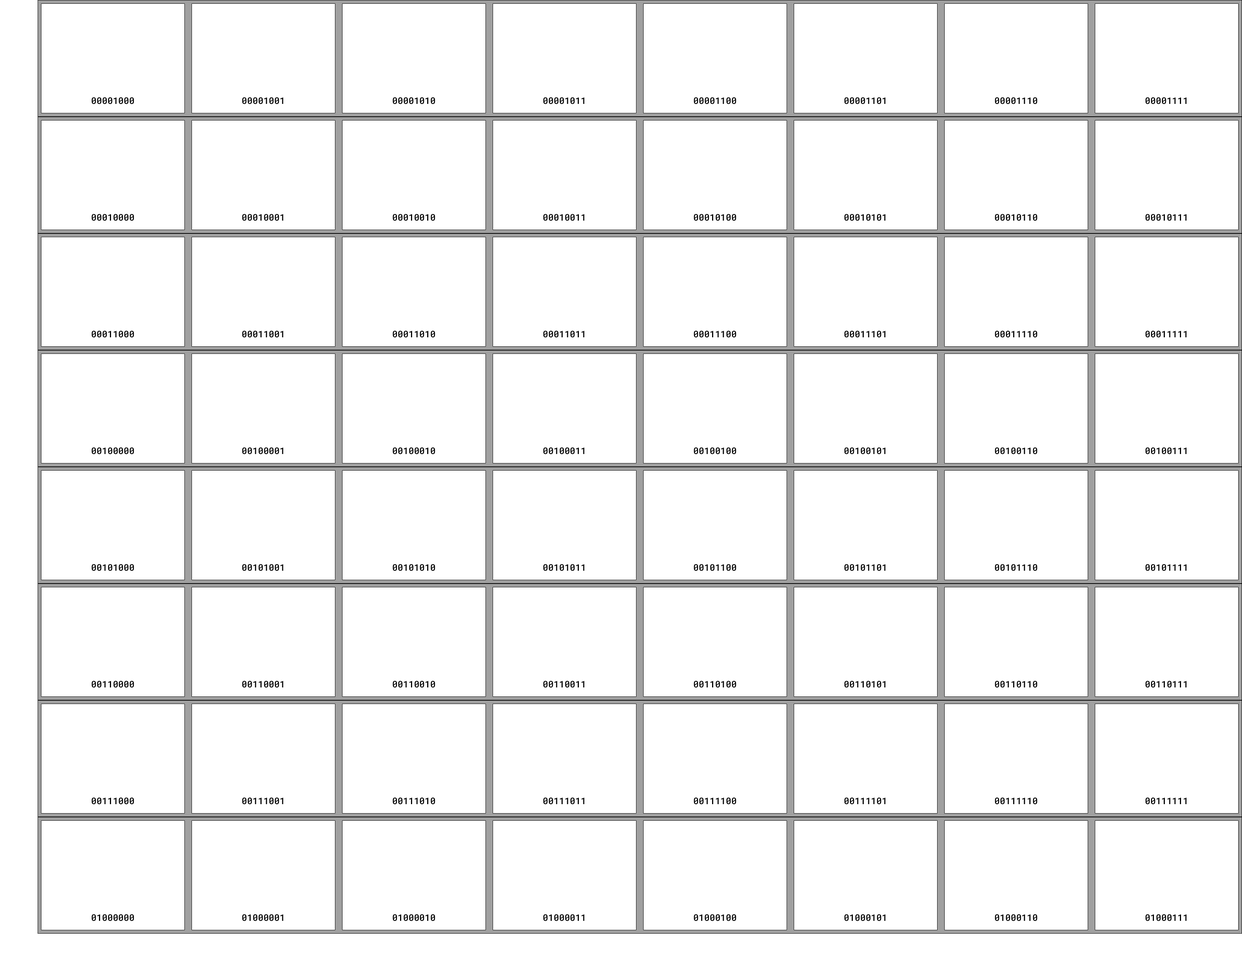
<style>
.page{position:relative;width:1242px;height:960px;background:#ffffff}
.page>*{position:absolute;margin:0}
.t1{font:9px "RobotoMono-Medium";color:#000000}
</style>
<div class="page">
<p class="t1" style="left:91px;top:97px;width:43px;height:7px">00001000</p>
<p class="t1" style="left:242px;top:97px;width:41px;height:7px">00001001</p>
<p class="t1" style="left:393px;top:97px;width:42px;height:7px">00001010</p>
<p class="t1" style="left:543px;top:97px;width:42px;height:7px">00001011</p>
<p class="t1" style="left:694px;top:97px;width:42px;height:7px">00001100</p>
<p class="t1" style="left:844px;top:97px;width:42px;height:7px">00001101</p>
<p class="t1" style="left:995px;top:97px;width:42px;height:7px">00001110</p>
<p class="t1" style="left:1145px;top:97px;width:42px;height:7px">00001111</p>
<p class="t1" style="left:91px;top:214px;width:43px;height:7px">00010000</p>
<p class="t1" style="left:242px;top:214px;width:41px;height:7px">00010001</p>
<p class="t1" style="left:393px;top:214px;width:42px;height:7px">00010010</p>
<p class="t1" style="left:543px;top:214px;width:42px;height:7px">00010011</p>
<p class="t1" style="left:694px;top:214px;width:42px;height:7px">00010100</p>
<p class="t1" style="left:844px;top:214px;width:42px;height:7px">00010101</p>
<p class="t1" style="left:995px;top:214px;width:42px;height:7px">00010110</p>
<p class="t1" style="left:1145px;top:214px;width:42px;height:7px">00010111</p>
<p class="t1" style="left:91px;top:331px;width:43px;height:7px">00011000</p>
<p class="t1" style="left:242px;top:331px;width:41px;height:7px">00011001</p>
<p class="t1" style="left:393px;top:331px;width:42px;height:7px">00011010</p>
<p class="t1" style="left:543px;top:331px;width:42px;height:7px">00011011</p>
<p class="t1" style="left:694px;top:331px;width:42px;height:7px">00011100</p>
<p class="t1" style="left:844px;top:331px;width:42px;height:7px">00011101</p>
<p class="t1" style="left:995px;top:331px;width:42px;height:7px">00011110</p>
<p class="t1" style="left:1145px;top:331px;width:42px;height:7px">00011111</p>
<p class="t1" style="left:91px;top:447px;width:43px;height:7px">00100000</p>
<p class="t1" style="left:242px;top:447px;width:41px;height:7px">00100001</p>
<p class="t1" style="left:393px;top:447px;width:42px;height:7px">00100010</p>
<p class="t1" style="left:543px;top:447px;width:42px;height:7px">00100011</p>
<p class="t1" style="left:694px;top:447px;width:42px;height:7px">00100100</p>
<p class="t1" style="left:844px;top:447px;width:42px;height:7px">00100101</p>
<p class="t1" style="left:995px;top:447px;width:42px;height:7px">00100110</p>
<p class="t1" style="left:1145px;top:447px;width:42px;height:7px">00100111</p>
<p class="t1" style="left:91px;top:564px;width:43px;height:7px">00101000</p>
<p class="t1" style="left:242px;top:564px;width:41px;height:7px">00101001</p>
<p class="t1" style="left:393px;top:564px;width:42px;height:7px">00101010</p>
<p class="t1" style="left:543px;top:564px;width:42px;height:7px">00101011</p>
<p class="t1" style="left:694px;top:564px;width:42px;height:7px">00101100</p>
<p class="t1" style="left:844px;top:564px;width:42px;height:7px">00101101</p>
<p class="t1" style="left:995px;top:564px;width:42px;height:7px">00101110</p>
<p class="t1" style="left:1145px;top:564px;width:42px;height:7px">00101111</p>
<p class="t1" style="left:91px;top:681px;width:43px;height:7px">00110000</p>
<p class="t1" style="left:242px;top:681px;width:41px;height:7px">00110001</p>
<p class="t1" style="left:393px;top:681px;width:42px;height:7px">00110010</p>
<p class="t1" style="left:543px;top:681px;width:42px;height:7px">00110011</p>
<p class="t1" style="left:694px;top:681px;width:42px;height:7px">00110100</p>
<p class="t1" style="left:844px;top:681px;width:42px;height:7px">00110101</p>
<p class="t1" style="left:995px;top:681px;width:42px;height:7px">00110110</p>
<p class="t1" style="left:1145px;top:681px;width:42px;height:7px">00110111</p>
<p class="t1" style="left:91px;top:797px;width:43px;height:7px">00111000</p>
<p class="t1" style="left:242px;top:797px;width:41px;height:7px">00111001</p>
<p class="t1" style="left:393px;top:797px;width:42px;height:7px">00111010</p>
<p class="t1" style="left:543px;top:797px;width:42px;height:7px">00111011</p>
<p class="t1" style="left:694px;top:797px;width:42px;height:7px">00111100</p>
<p class="t1" style="left:844px;top:797px;width:42px;height:7px">00111101</p>
<p class="t1" style="left:995px;top:797px;width:42px;height:7px">00111110</p>
<p class="t1" style="left:1145px;top:797px;width:42px;height:7px">00111111</p>
<p class="t1" style="left:91px;top:914px;width:43px;height:7px">01000000</p>
<p class="t1" style="left:242px;top:914px;width:41px;height:7px">01000001</p>
<p class="t1" style="left:393px;top:914px;width:42px;height:7px">01000010</p>
<p class="t1" style="left:543px;top:914px;width:42px;height:7px">01000011</p>
<p class="t1" style="left:694px;top:914px;width:42px;height:7px">01000100</p>
<p class="t1" style="left:844px;top:914px;width:42px;height:7px">01000101</p>
<p class="t1" style="left:995px;top:914px;width:42px;height:7px">01000110</p>
<p class="t1" style="left:1145px;top:914px;width:42px;height:7px">01000111</p>
</div>
